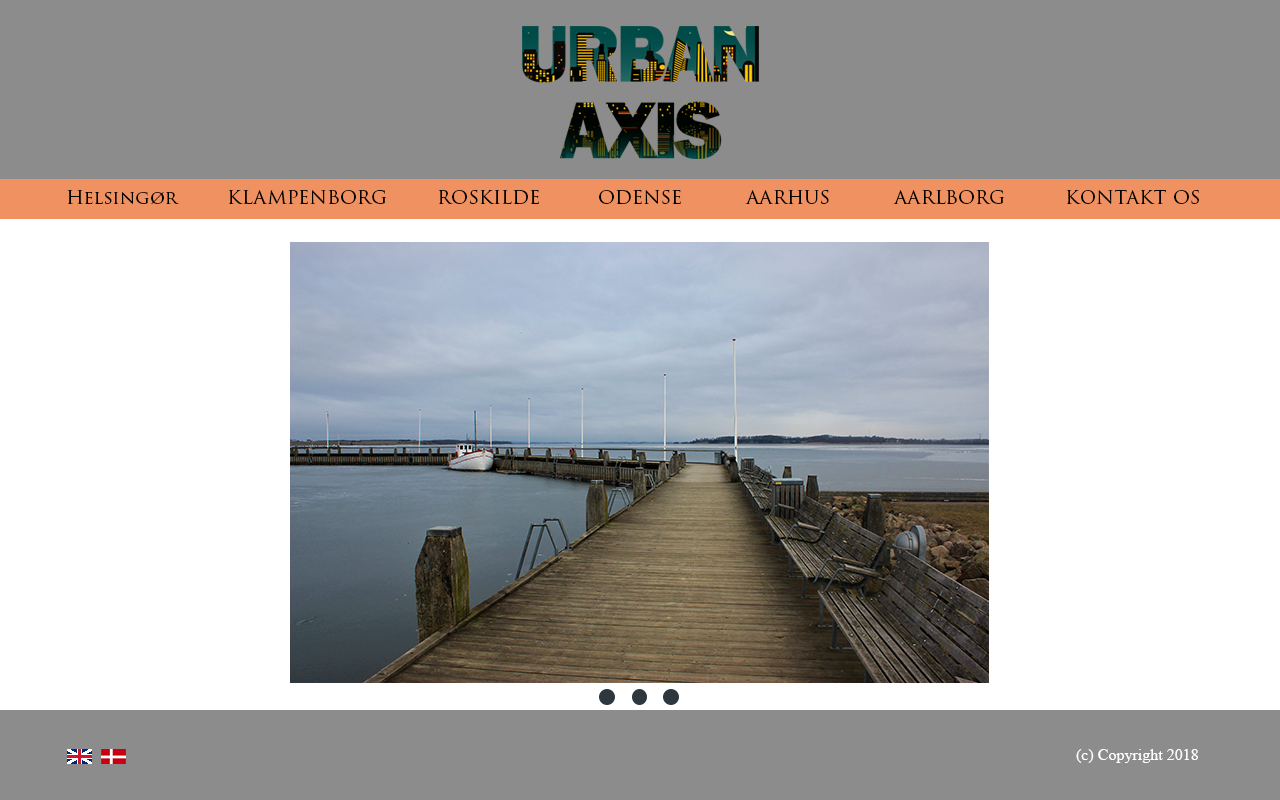
<style>
.page{position:relative;width:1280px;height:800px;background:#8c8c8c}
.page>*{position:absolute;margin:0}
.t1{font:18.7px "TrajanPro3-Regular";color:#000000}
.t2{font:12px "TimesNewRomanPSMT";color:#fefefe}
</style>
<div class="page">
<p class="t1" style="left:67px;top:190px;width:112px;height:15px">Helsingør</p>
<p class="t1" style="left:228px;top:190px;width:159px;height:14px">KLAMPENBORG</p>
<p class="t1" style="left:438px;top:190px;width:101px;height:15px">ROSKILDE</p>
<p class="t1" style="left:599px;top:190px;width:82px;height:15px">ODENSE</p>
<p class="t1" style="left:745px;top:190px;width:84px;height:14px">AARHUS</p>
<p class="t1" style="left:893px;top:190px;width:112px;height:14px">AARLBORG</p>
<p class="t1" style="left:1066px;top:190px;width:133px;height:14px">KONTAKT OS</p>
<p class="t2" style="left:1076px;top:749px;width:122px;height:14px">(c) Copyright 2018</p>
</div>
